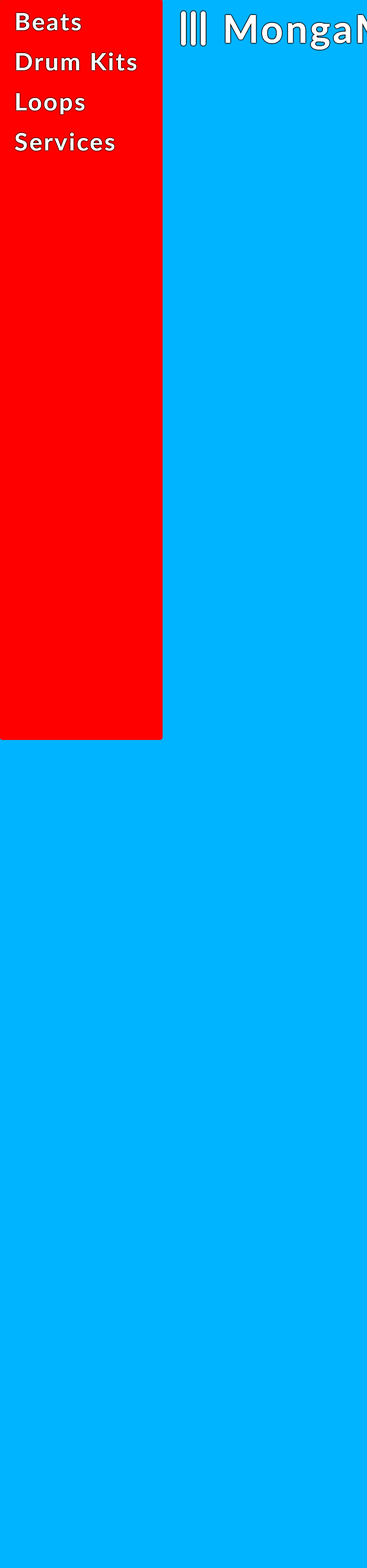
<style>
.page{position:relative;width:367px;height:1568px;background:#00b4ff}
.page>*{position:absolute;margin:0}
.t1{font:24.1px/40.1px "Lato-Bold";letter-spacing:0.065em;color:#ffffff}
</style>
<div class="page">
<p class="t1" style="left:15px;top:13px;width:121px;height:138px">Beats<br>Drum Kits <br>Loops <br>Services</p>
</div>
